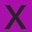
<style>
.page{position:relative;width:32px;height:32px;background:#a910a9}
.page>*{position:absolute;margin:0}
.t1{font:49.8px "MyriadPro-Regular";color:#292329}
</style>
<div class="page">
<p class="t1" style="left:4px;top:5px;width:23px;height:24px">x</p>
</div>
